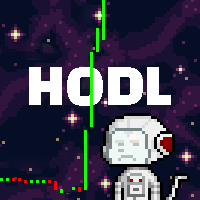
<style>
.page{position:relative;width:200px;height:200px;background:#050e25}
.page>*{position:absolute;margin:0}
.t1{font:50px "BlackHanSans-Regular";letter-spacing:0.015em;color:#ffffff}
</style>
<div class="page">
<p class="t1" style="left:29px;top:67px;width:142px;height:39px">HODL</p>
</div>
